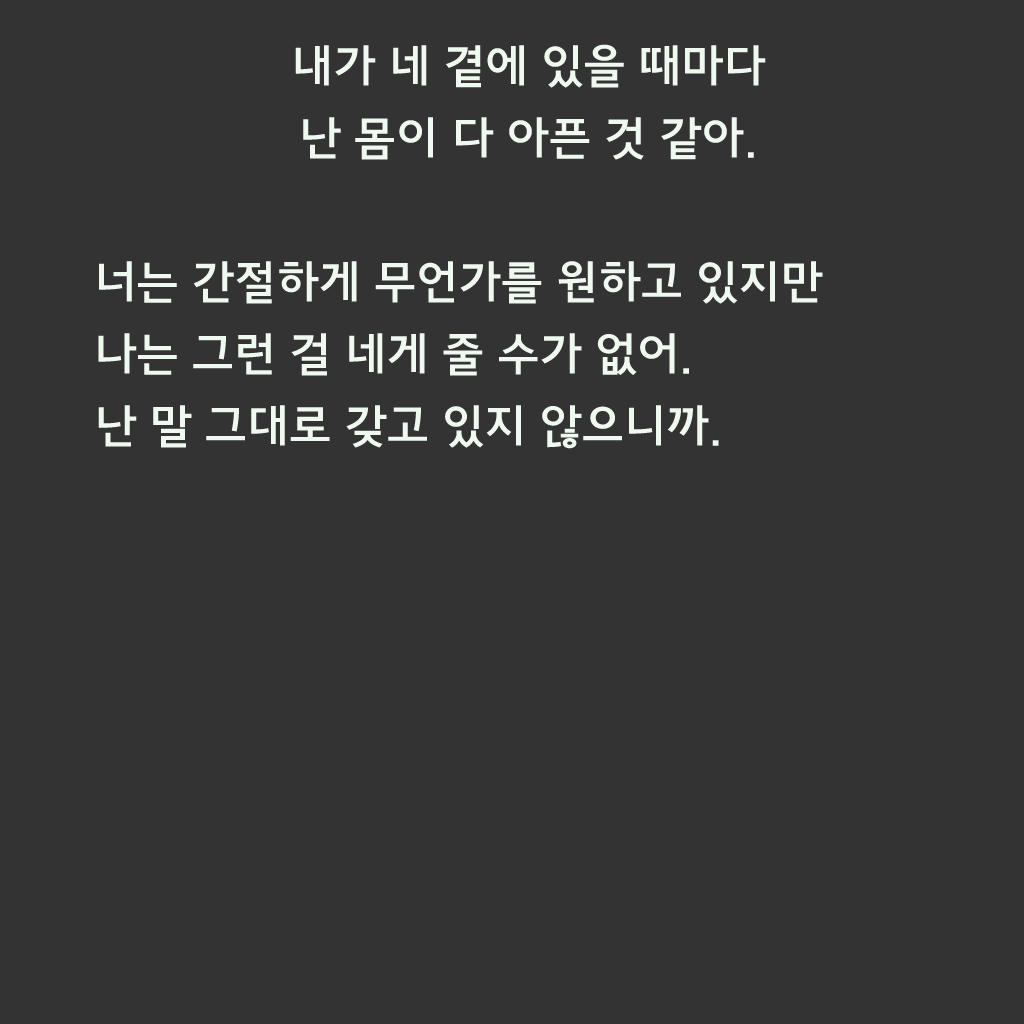
<style>
.page{position:relative;width:1024px;height:1024px;background:#333333}
.page>*{position:absolute;margin:0}
.t1{font:46px/72px "JejuGothic";color:#f0f9f0}
</style>
<div class="page">
<p class="t1" style="left:295px;top:44px;width:471px;height:116px;text-align:center">내가 네 곁에 있을 때마다<br>난 몸이 다 아픈 것 같아.</p>
<p class="t1" style="left:98px;top:261px;width:725px;height:188px">너는 간절하게 무언가를 원하고 있지만 <br>나는 그런 걸 네게 줄 수가 없어.<br>난 말 그대로 갖고 있지 않으니까.</p>
</div>
